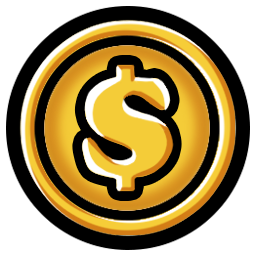
<style>
.page{position:relative;width:256px;height:256px;background:#ffffff}
.page>*{position:absolute;margin:0}
.t1{font:159.1px "AGCrownStyle-Roman";color:#f4cc38}
</style>
<div class="page">
<p class="t1" style="left:82px;top:65px;width:90px;height:126px">$</p>
</div>
